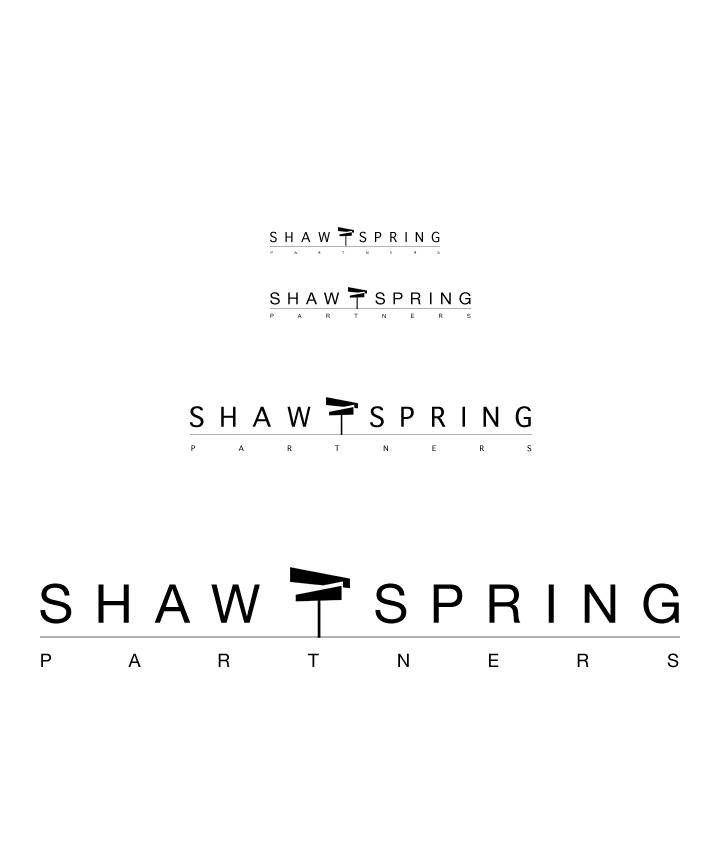
<style>
.page{position:relative;width:720px;height:864px;background:#ffffff}
.page>*{position:absolute;margin:0}
.t1{font:18.5px "AppleSymbols";letter-spacing:0.4em;color:#000000}
.t2{font:5.2px "AppleSymbols";letter-spacing:4.17em}
.t3{font:16.6px "HelveticaNeue";letter-spacing:0.4em;color:#000000}
.t4{font:5.8px "HelveticaNeue";letter-spacing:4.17em}
.t5{font:37px "AppleSymbols";letter-spacing:0.4em;color:#000000}
.t6{font:10.4px "AppleSymbols";letter-spacing:4.17em}
.t7{font:53.6px "HelveticaNeue";letter-spacing:0.4em;color:#000000}
.t8{font:18.6px "HelveticaNeue";letter-spacing:4.17em;color:#000000}
</style>
<div class="page">
<p class="t1" style="left:270px;top:231px;width:60px;height:12px">SHAW</p>
<p class="t1" style="left:359px;top:231px;width:81px;height:12px">SPRING</p>
<p class="t2" style="left:270px;top:251px;width:170px;height:3px">PARTNERS</p>
<p class="t3" style="left:270px;top:292px;width:70px;height:13px">SHAW</p>
<p class="t3" style="left:375px;top:292px;width:96px;height:13px">SPRING</p>
<p class="t4" style="left:270px;top:313px;width:201px;height:5px">PARTNERS</p>
<p class="t5" style="left:189px;top:406px;width:122px;height:22px">SHAW</p>
<p class="t5" style="left:370px;top:406px;width:161px;height:22px">SPRING</p>
<p class="t6" style="left:191px;top:445px;width:341px;height:7px">PARTNERS</p>
<p class="t7" style="left:40px;top:583px;width:220px;height:41px">SHAW</p>
<p class="t7" style="left:375px;top:583px;width:304px;height:41px">SPRING</p>
<p class="t8" style="left:41px;top:653px;width:638px;height:15px">PARTNERS</p>
</div>
